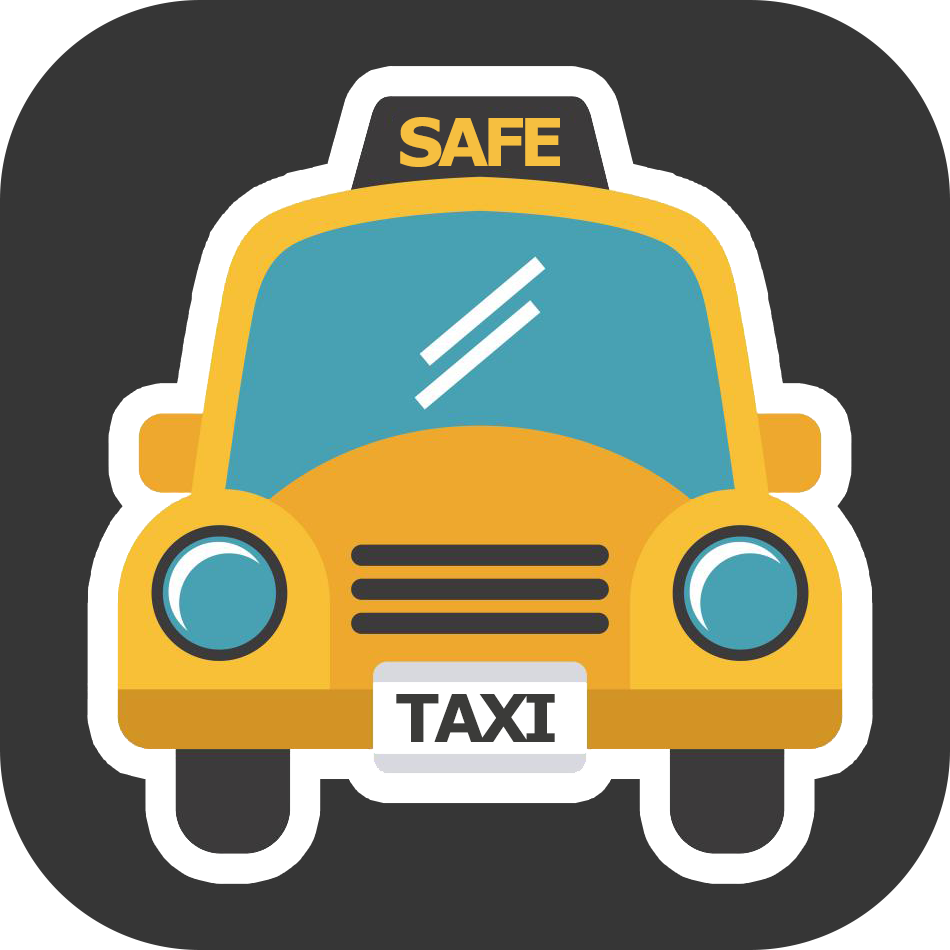
<style>
.page{position:relative;width:950px;height:950px;background:#363636}
.page>*{position:absolute;margin:0}
.t1{font:66px "Verdana-Bold";letter-spacing:-0.09em;color:#f6bf40}
.t2{font:66px "Verdana-Bold";letter-spacing:-0.09em;color:#3b3b39}
</style>
<div class="page">
<p class="t1" style="left:400px;top:117px;width:160px;height:50px">SAFE</p>
<p class="t2" style="left:396px;top:694px;width:159px;height:48px">TAXI</p>
</div>
